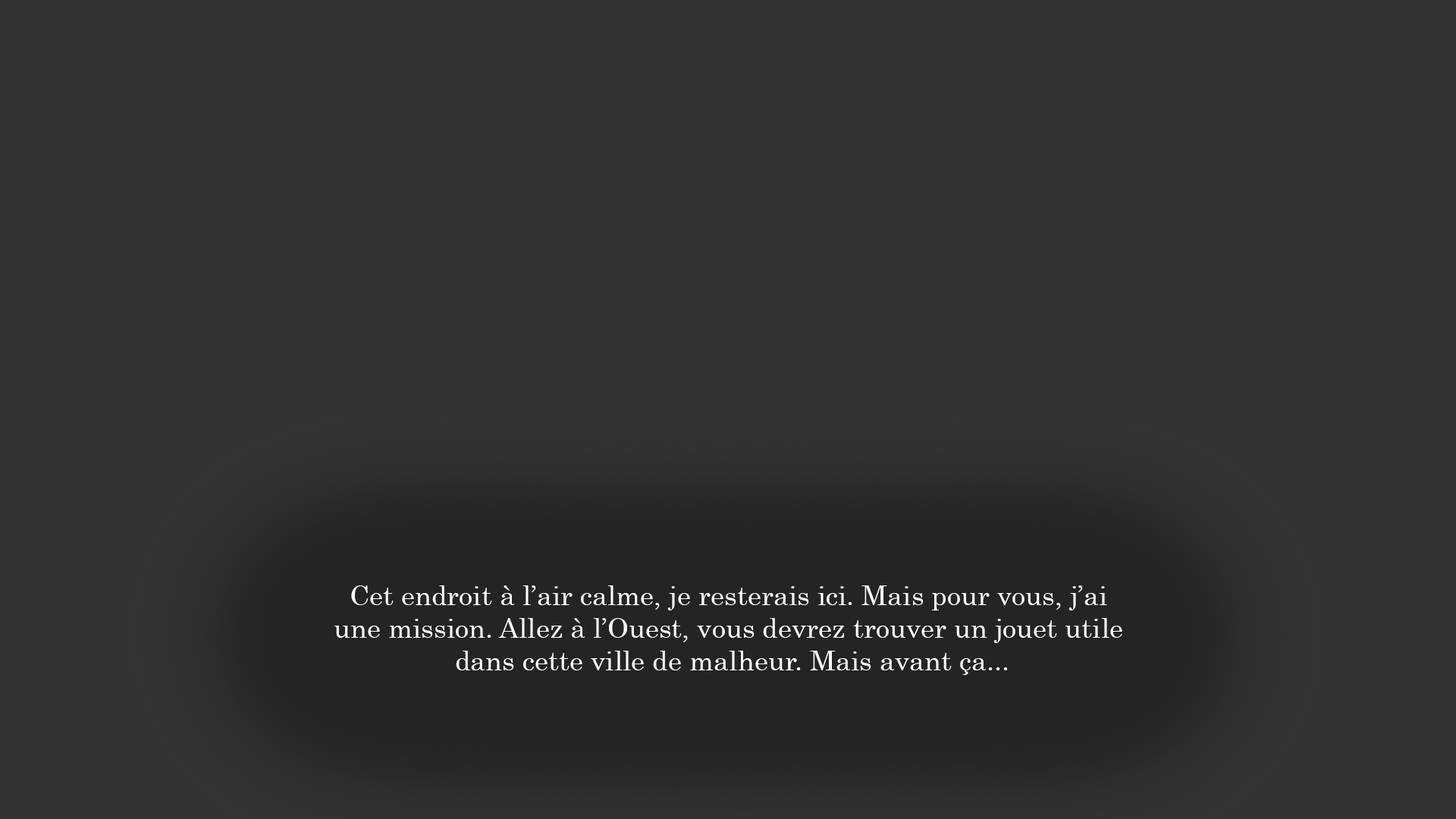
<style>
.page{position:relative;width:1456px;height:819px;background:#333333}
.page>*{position:absolute;margin:0}
.t1{font:27.3px "Century";color:#ffffff}
</style>
<div class="page">
<p class="t1" style="left:334px;top:585px;width:788px;height:90px;text-align:center">Cet endroit à l’air calme, je resterais ici. Mais pour vous, j’ai <br>une mission. Allez à l’Ouest, vous devrez trouver un jouet utile <br>dans cette ville de malheur. Mais avant ça...</p>
</div>
